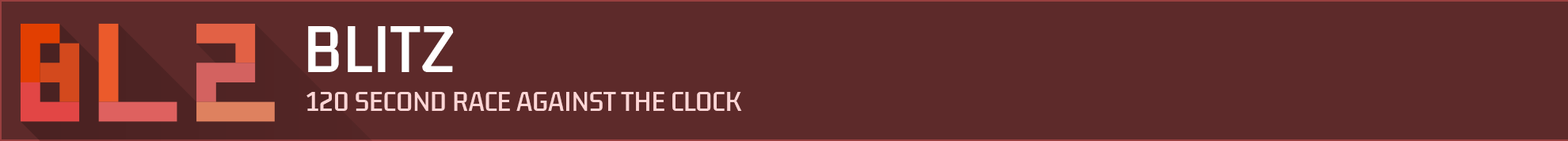
<style>
.page{position:relative;width:1568px;height:141px;background:#5d2a2a}
.page>*{position:absolute;margin:0}
.t1{font:57px "KdamThmorPro-Regular";color:#ffffff}
.t2{font:23.8px "KdamThmorPro-Regular";color:#ffd6d6}
</style>
<div class="page">
<p class="t1" style="left:308px;top:26px;width:146px;height:46px">BLITZ</p>
<p class="t2" style="left:306px;top:92px;width:436px;height:19px">120 SECOND RACE AGAINST THE CLOCK</p>
</div>
